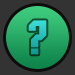
<style>
.page{position:relative;width:75px;height:75px;background:#333333}
.page>*{position:absolute;margin:0}
.t1{font:48px "Whitestone-Bold"}
</style>
<div class="page">
<p class="t1" style="left:28px;top:20px;width:19px;height:35px">?</p>
</div>
